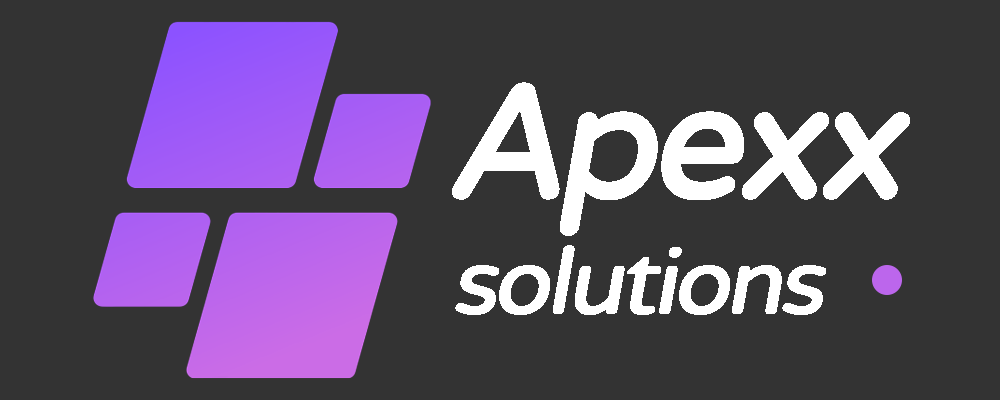
<style>
.page{position:relative;width:1000px;height:400px;background:#333333}
.page>*{position:absolute;margin:0}
.t1{font:158.3px "VarelaRound-Regular";letter-spacing:-0.06em;color:#ffffff;font-weight:bold;font-style:italic}
.t2{font:91.7px "VarelaRound-Regular";letter-spacing:-0.06em;color:#ffffff;font-weight:bold;font-style:italic}
</style>
<div class="page">
<p class="t1" style="left:452px;top:82px;width:458px;height:154px">Apexx</p>
<p class="t2" style="left:455px;top:245px;width:371px;height:70px">solutions</p>
</div>
